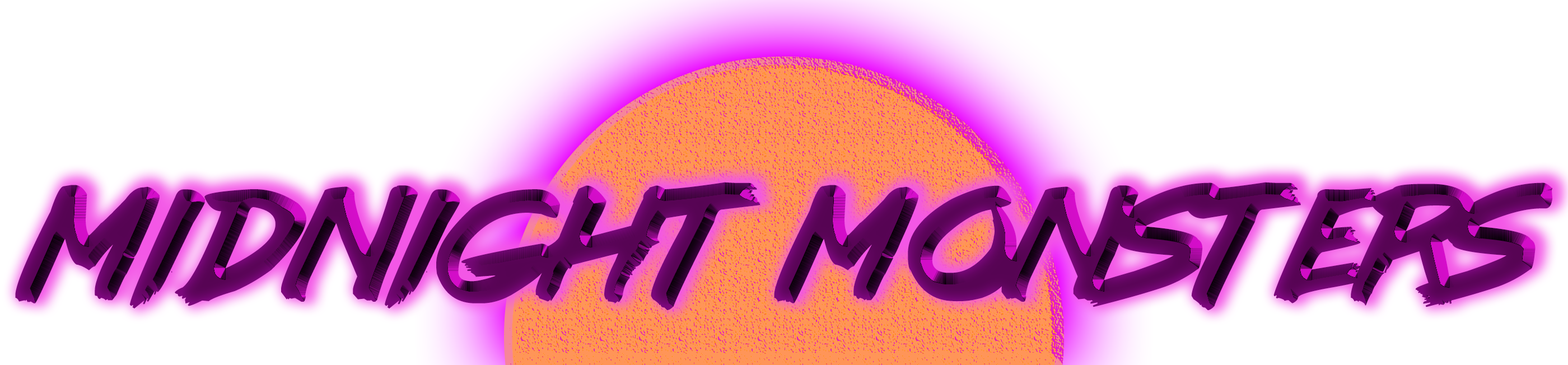
<style>
.page{position:relative;width:1568px;height:365px;background:#ffffff}
.page>*{position:absolute;margin:0}
.t1{font:140px "lazer84"}
</style>
<div class="page">
<p class="t1" style="left:15px;top:182px;width:1538px;height:128px">Midnight Monsters</p>
</div>
